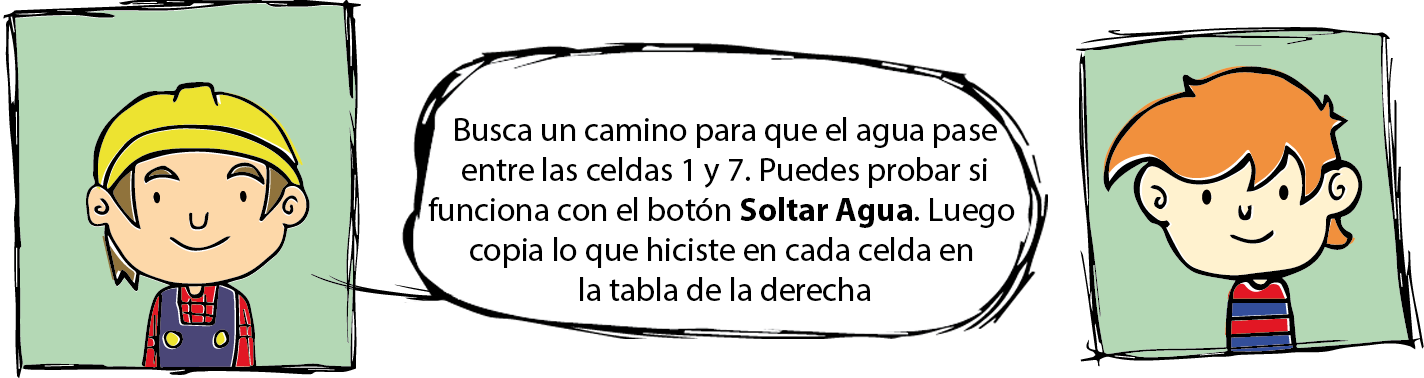
<style>
.page{position:relative;width:1424px;height:378px;background:#ffffff}
.page>*{position:absolute;margin:0}
.t1{font:33.3px "MyriadHebrew-Regular";color:#000000}
.t2{font:33.3px "MyriadHebrew-Bold";color:#000000}
</style>
<div class="page">
<p class="t1" style="left:428px;top:117px;width:587px;height:184px;text-align:center">Busca un camino para que el agua pase<br>entre las celdas 1 y 7. Puedes probar si<br>funciona con el botón <span class="t2">Soltar Agua</span>. Luego <br>copia lo que hiciste en cada celda en <br>la tabla de la derecha</p>
</div>
